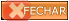
<style>
.page{position:relative;width:69px;height:21px}
.page>*{position:absolute;margin:0}
.t1{font:10.7px "Verdana";color:#ffffff}
</style>
<div class="page">
<p class="t1" style="left:24px;top:6px;width:43px;height:9px">FECHAR</p>
</div>
